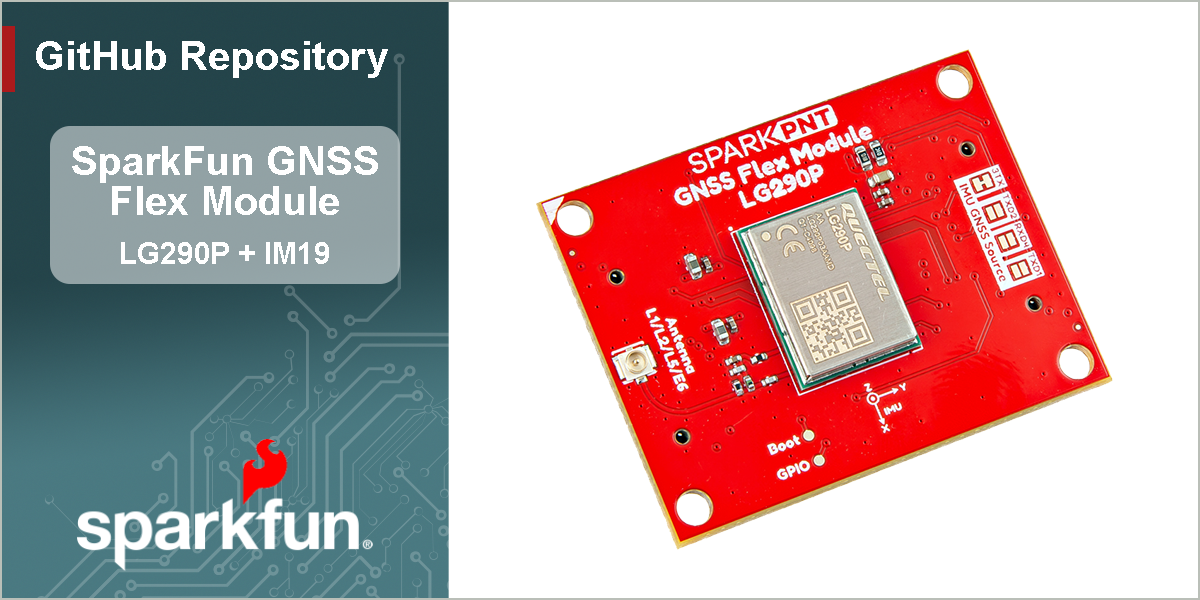
<style>
.page{position:relative;width:1200px;height:600px;background:#ffffff}
.page>*{position:absolute;margin:0}
.t1{font:40px "Arial-BoldMT";color:#ffffff}
.t2{font:30px "Arial-BoldMT";color:#ffffff}
</style>
<div class="page">
<p class="t1" style="left:36px;top:41px;width:352px;height:37px">GitHub Repository</p>
<p class="t1" style="left:72px;top:146px;width:306px;height:69px;text-align:center">SparkFun GNSS<br>Flex Module</p>
<p class="t2" style="left:121px;top:242px;width:208px;height:22px">LG290P + IM19</p>
</div>
